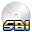
<style>
.page{position:relative;width:32px;height:32px}
.page>*{position:absolute;margin:0}
.t1{font:14px "Uranium"}
</style>
<div class="page">
<p class="t1" style="left:4px;top:21px;width:25px;height:9px">SBI</p>
</div>
